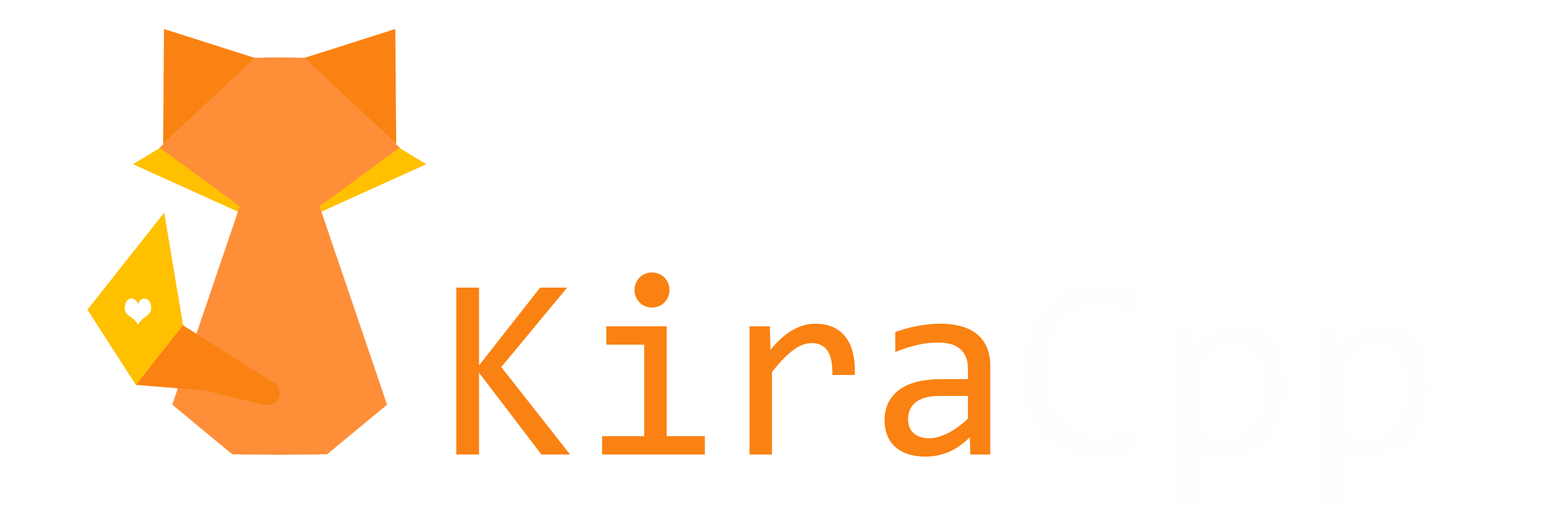
<style>
.page{position:relative;width:1568px;height:523px;background:#ffffff}
.page>*{position:absolute;margin:0}
.t1{font:261.3px "Consolas";color:#fa8212}
.t2{font:261.3px "Consolas";color:#fefefe}
</style>
<div class="page">
<p class="t1" style="left:456px;top:272px;width:973px;height:234px">Kira<span class="t2">Cpp</span></p>
</div>
